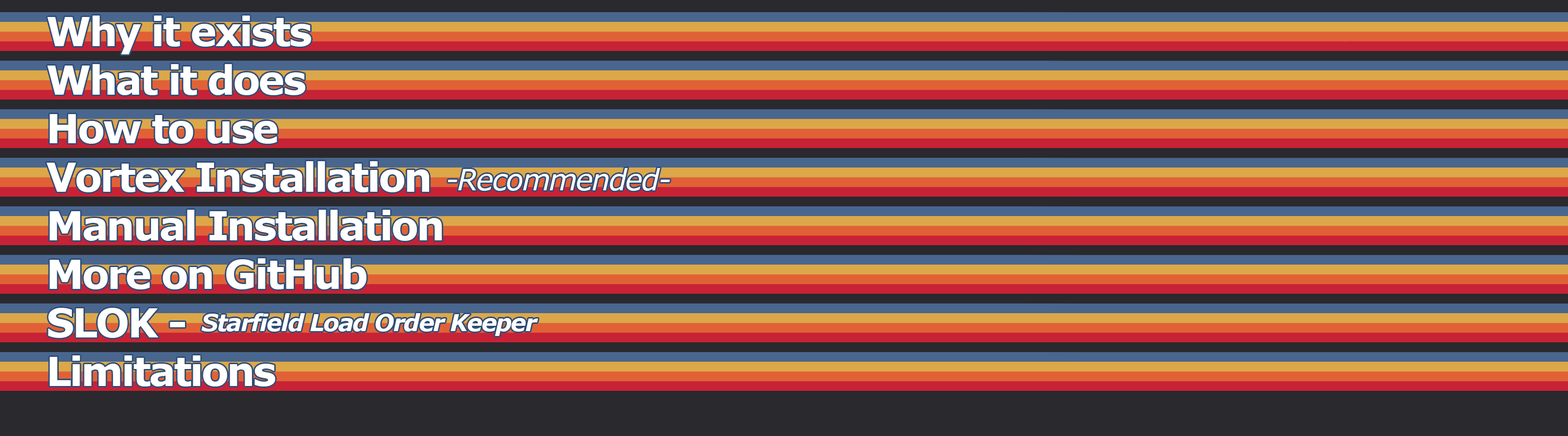
<style>
.page{position:relative;width:1568px;height:436px;background:#29292e}
.page>*{position:absolute;margin:0}
.t1{font:39.8px "Verdana-Bold";letter-spacing:-0.05em;color:#ffffff}
.t2{font:29.1px "Verdana-Italic";letter-spacing:-0.05em;color:#ffffff}
.t3{font:23.3px "Verdana-BoldItalic";letter-spacing:-0.05em;color:#ffffff}
</style>
<div class="page">
<p class="t1" style="left:47px;top:16px;width:264px;height:38px">Why it exists</p>
<p class="t1" style="left:47px;top:64px;width:258px;height:31px">What it does</p>
<p class="t1" style="left:50px;top:114px;width:228px;height:30px">How to use</p>
<p class="t1" style="left:47px;top:161px;width:382px;height:31px">Vortex Installation</p>
<p class="t2" style="left:448px;top:168px;width:222px;height:23px">-Recommended-</p>
<p class="t1" style="left:50px;top:210px;width:392px;height:31px">Manual Installation</p>
<p class="t1" style="left:50px;top:258px;width:317px;height:31px">More on GitHub</p>
<p class="t1" style="left:48px;top:308px;width:137px;height:30px">SLOK -</p>
<p class="t3" style="left:201px;top:313px;width:337px;height:23px">Starfield Load Order Keeper</p>
<p class="t1" style="left:50px;top:355px;width:225px;height:31px">Limitations</p>
</div>
